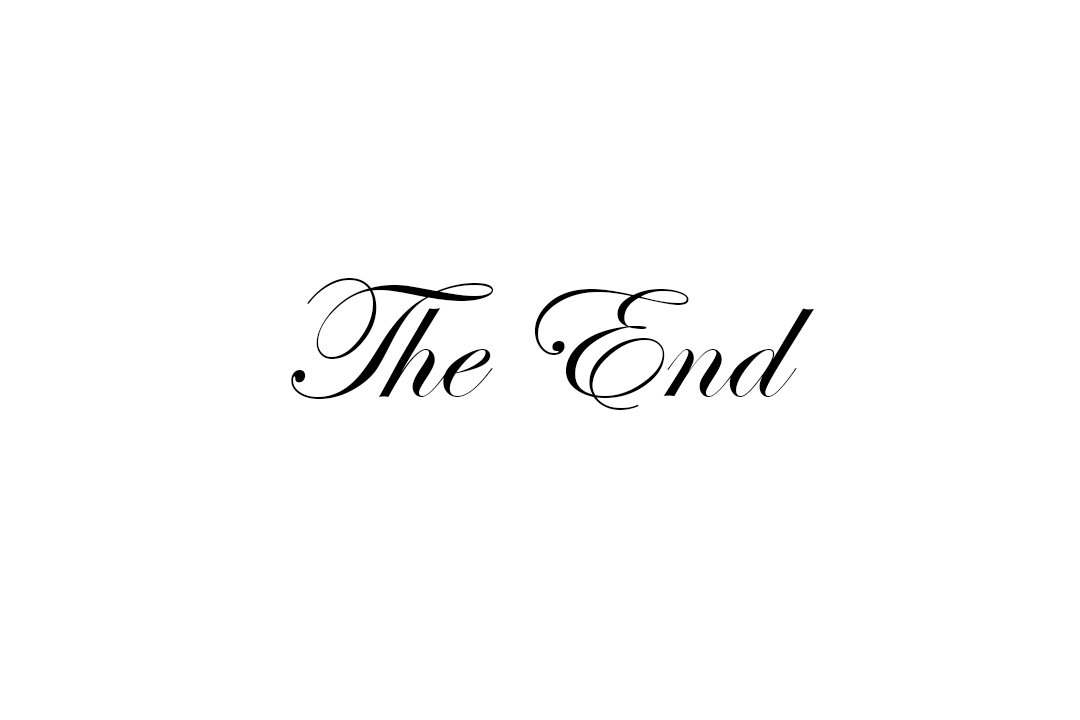
<style>
.page{position:relative;width:1080px;height:720px;background:#ffffff}
.page>*{position:absolute;margin:0}
.t1{font:173.6px "EdwardianScriptITC";color:#000000}
</style>
<div class="page">
<p class="t1" style="left:291px;top:278px;width:523px;height:132px">The End</p>
</div>
